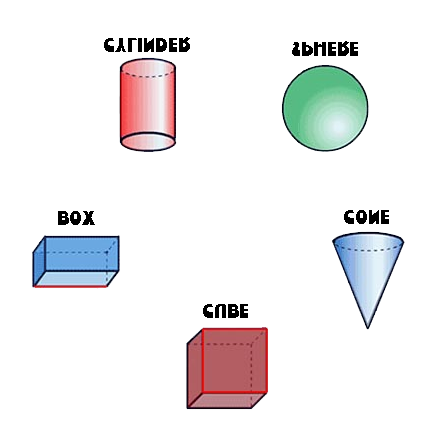
<style>
.page{position:relative;width:445px;height:445px;background:#ffffff}
.page>*{position:absolute;margin:0}
.t1{font:18px "ShowcardGothic-Reg";color:#000000}
</style>
<div class="page">
<p class="t1" style="left:104px;top:37px;width:86px;height:15px">Cylinder</p>
<p class="t1" style="left:292px;top:41px;width:66px;height:15px">Sphere</p>
<p class="t1" style="left:58px;top:211px;width:37px;height:14px">box</p>
<p class="t1" style="left:344px;top:210px;width:45px;height:14px">Cone</p>
<p class="t1" style="left:203px;top:304px;width:45px;height:14px">Cube</p>
</div>
